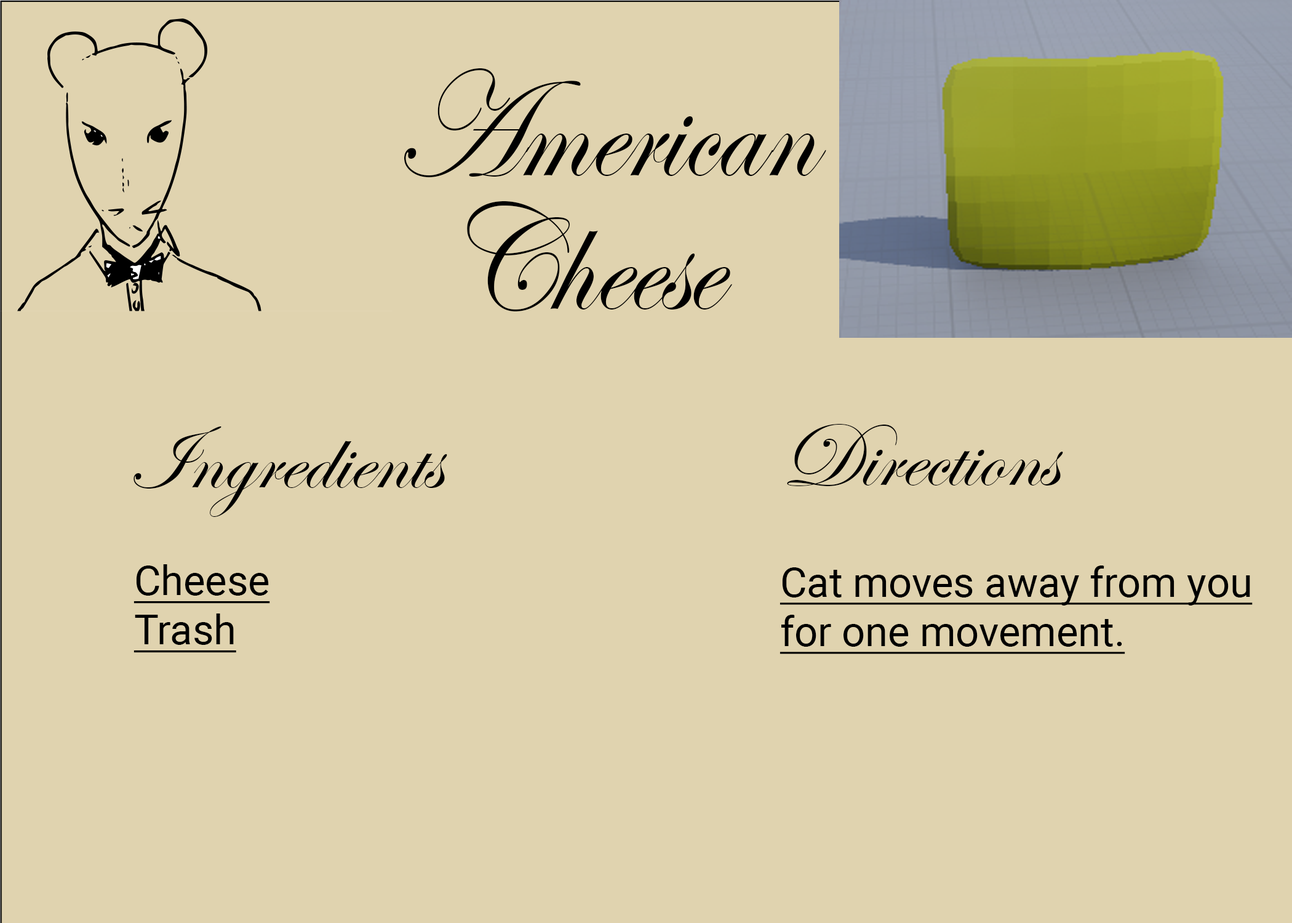
<style>
.page{position:relative;width:1292px;height:923px;background:#e0d3af}
.page>*{position:absolute;margin:0}
.t1{font:153.8px "EdwardianScriptITC";color:#000000;scale:0.88 1}
.t2{font:92.3px "EdwardianScriptITC";color:#000000}
.t3{font:41px "Roboto-Regular";color:#000000;text-decoration:underline}
</style>
<div class="page">
<p class="t1" style="left:404px;top:68px;width:422px;height:109px">American</p>
<p class="t1" style="left:467px;top:201px;width:265px;height:110px">Cheese</p>
<p class="t2" style="left:787px;top:424px;width:276px;height:62px">Directions</p>
<p class="t2" style="left:134px;top:426px;width:313px;height:91px">Ingredients</p>
<p class="t3" style="left:134px;top:564px;width:136px;height:89px">Cheese<br>Trash</p>
<p class="t3" style="left:780px;top:565px;width:473px;height:89px">Cat moves away from you<br>for one movement.</p>
</div>
